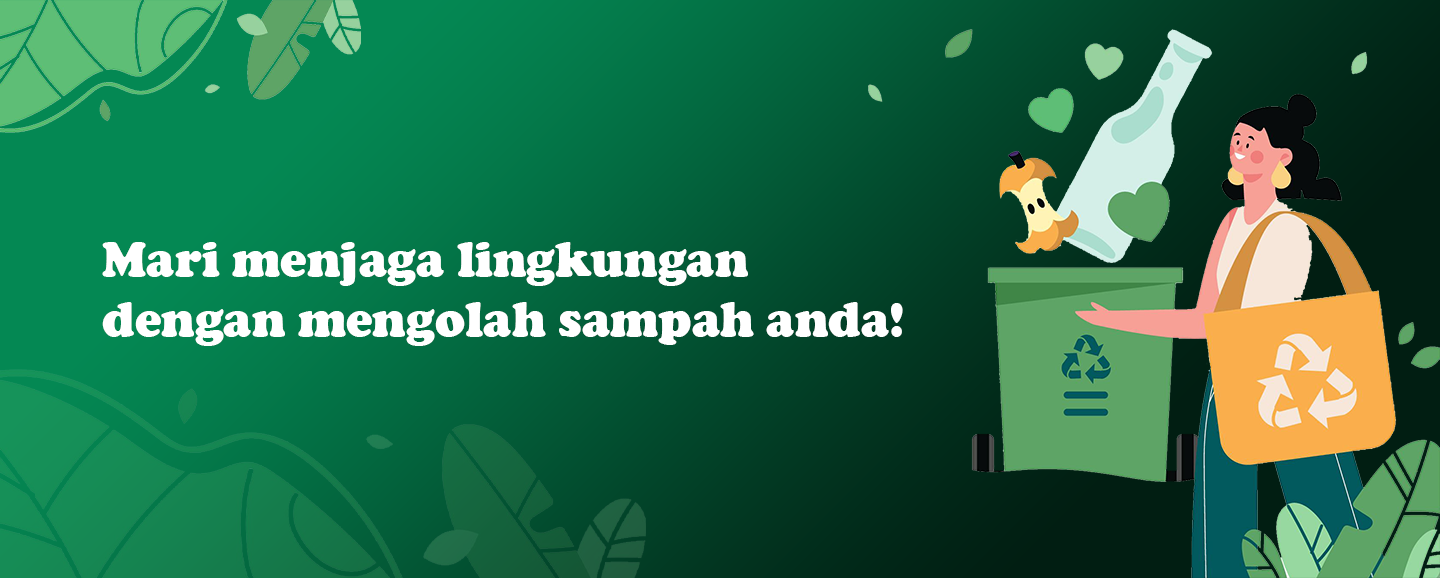
<style>
.page{position:relative;width:1440px;height:578px}
.page>*{position:absolute;margin:0}
.t1{font:50px "CooperBlack";color:#ffffff}
</style>
<div class="page">
<p class="t1" style="left:102px;top:242px;width:801px;height:104px">Mari menjaga lingkungan <br>dengan mengolah sampah anda!</p>
</div>
